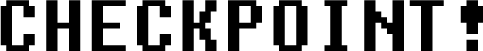
<style>
.page{position:relative;width:483px;height:51px;background:#000000}
.page>*{position:absolute;margin:0}
.t1{font:72px "Fixedsys";color:#000000}
</style>
<div class="page">
<p class="t1" style="left:0px;top:0px;width:483px;height:51px">CHECKPOINT!</p>
</div>
